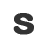
<style>
.page{position:relative;width:50px;height:50px;background:#ffffff}
.page>*{position:absolute;margin:0}
.t1{font:41.3px "ArialRoundedMTBold";letter-spacing:0.1em;color:#333333;font-weight:bold}
</style>
<div class="page">
<p class="t1" style="left:13px;top:13px;width:21px;height:22px">s</p>
</div>
